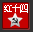
<style>
.page{position:relative;width:33px;height:32px;background:#c50000}
.page>*{position:absolute;margin:0}
.t1{font:10.4px "SimSun";letter-spacing:-0.25em;color:#ffffff}
</style>
<div class="page">
<p class="t1" style="left:4px;top:4px;width:24px;height:9px">红十四</p>
</div>
